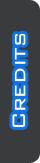
<style>
.page{position:relative;width:40px;height:163px;background:#3a3b3d}
.page>*{position:absolute;margin:0}
.t1{font:24px "BankGothic-Light";color:#ffffff}
</style>
<div class="page">
<p class="t1" style="left:12px;top:33px;width:14px;height:95px;rotate:-90deg">Credits</p>
</div>
